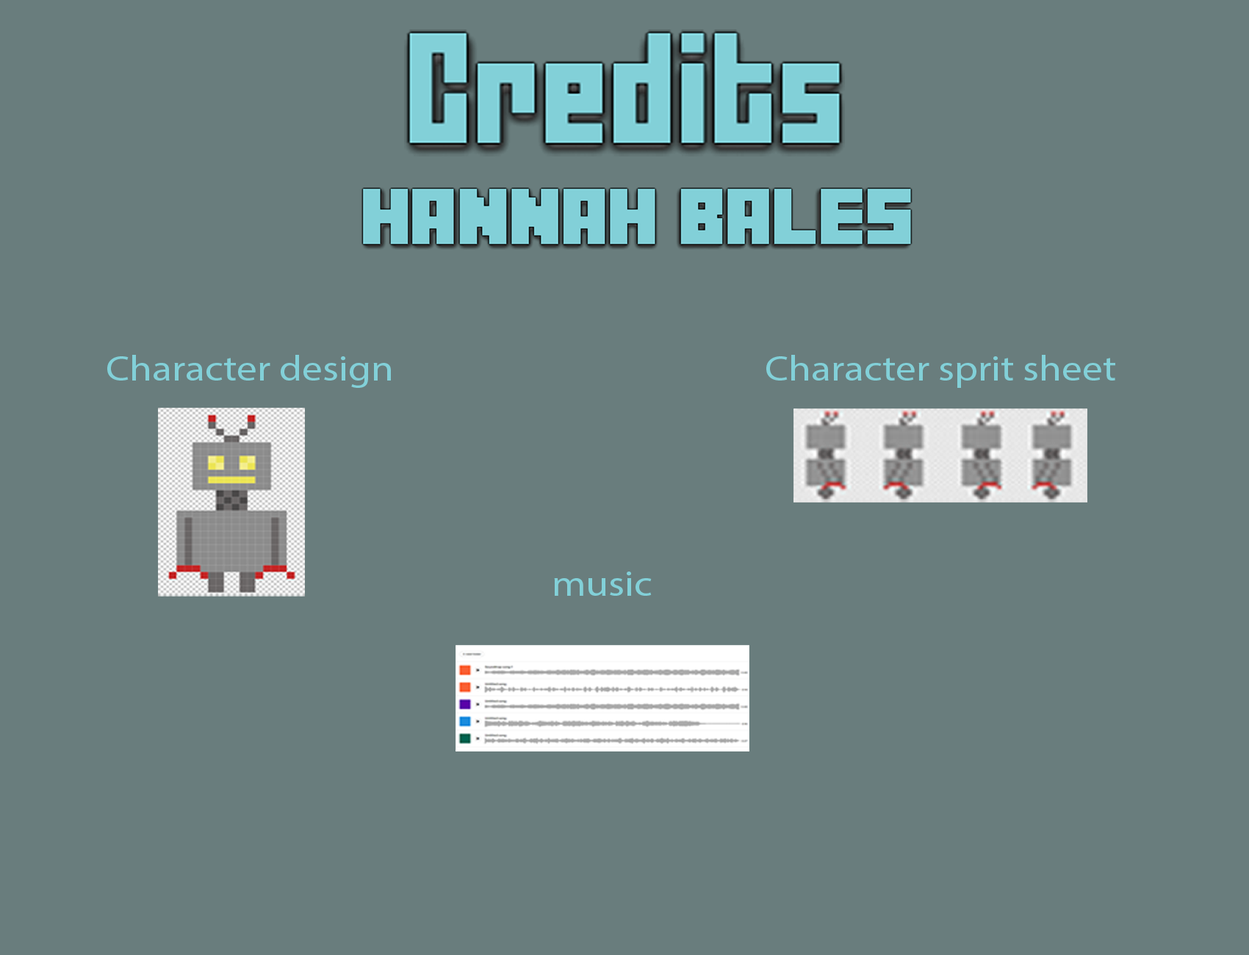
<style>
.page{position:relative;width:1249px;height:955px;background:#697d7d}
.page>*{position:absolute;margin:0}
.t1{font:35.4px "MyriadPro-Regular";color:#82d0d8;scale:1.15 1}
</style>
<div class="page">
<p class="t1" style="left:107px;top:355px;width:284px;height:33px">Character design</p>
<p class="t1" style="left:766px;top:355px;width:349px;height:33px">Character sprit sheet</p>
<p class="t1" style="left:554px;top:571px;width:98px;height:25px">music</p>
</div>
